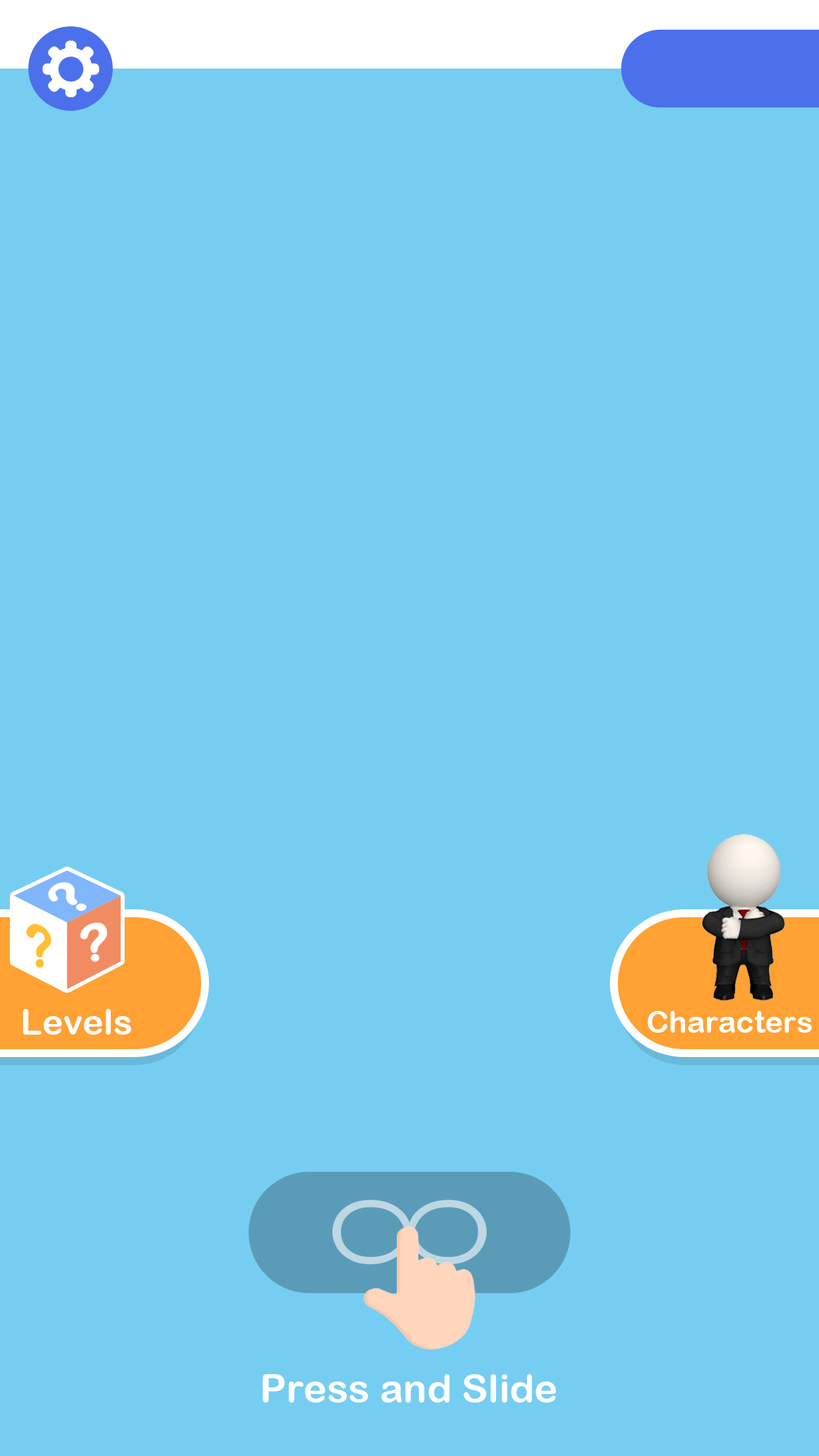
<style>
.page{position:relative;width:819px;height:1456px;background:#76cdf2}
.page>*{position:absolute;margin:0}
.t1{font:35.6px "ArialRoundedMTBold";color:#ffffff}
.t2{font:30.3px "ArialRoundedMTBold";color:#ffffff}
.t3{font:39.6px "ArialRoundedMTBold";color:#ffffff}
</style>
<div class="page">
<p class="t1" style="left:23px;top:1009px;width:108px;height:26px">Levels</p>
<p class="t2" style="left:648px;top:1011px;width:164px;height:22px">Characters</p>
<p class="t3" style="left:262px;top:1374px;width:294px;height:29px">Press and Slide</p>
</div>
